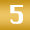
<style>
.page{position:relative;width:30px;height:30px}
.page>*{position:absolute;margin:0}
.t1{font:25px "Silom";color:#ffffff}
</style>
<div class="page">
<p class="t1" style="left:10px;top:5px;width:13px;height:19px">5</p>
</div>
